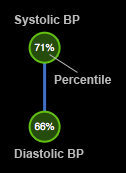
<style>
.page{position:relative;width:126px;height:173px;background:#000000}
.page>*{position:absolute;margin:0}
.t1{font:12px "Arial-BoldMT";color:#bbbbbb}
</style>
<div class="page">
<p class="t1" style="left:14px;top:15px;width:66px;height:11px">Systolic BP</p>
<p class="t1" style="left:54px;top:75px;width:58px;height:9px">Percentile</p>
<p class="t1" style="left:14px;top:149px;width:70px;height:9px">Diastolic BP</p>
</div>
